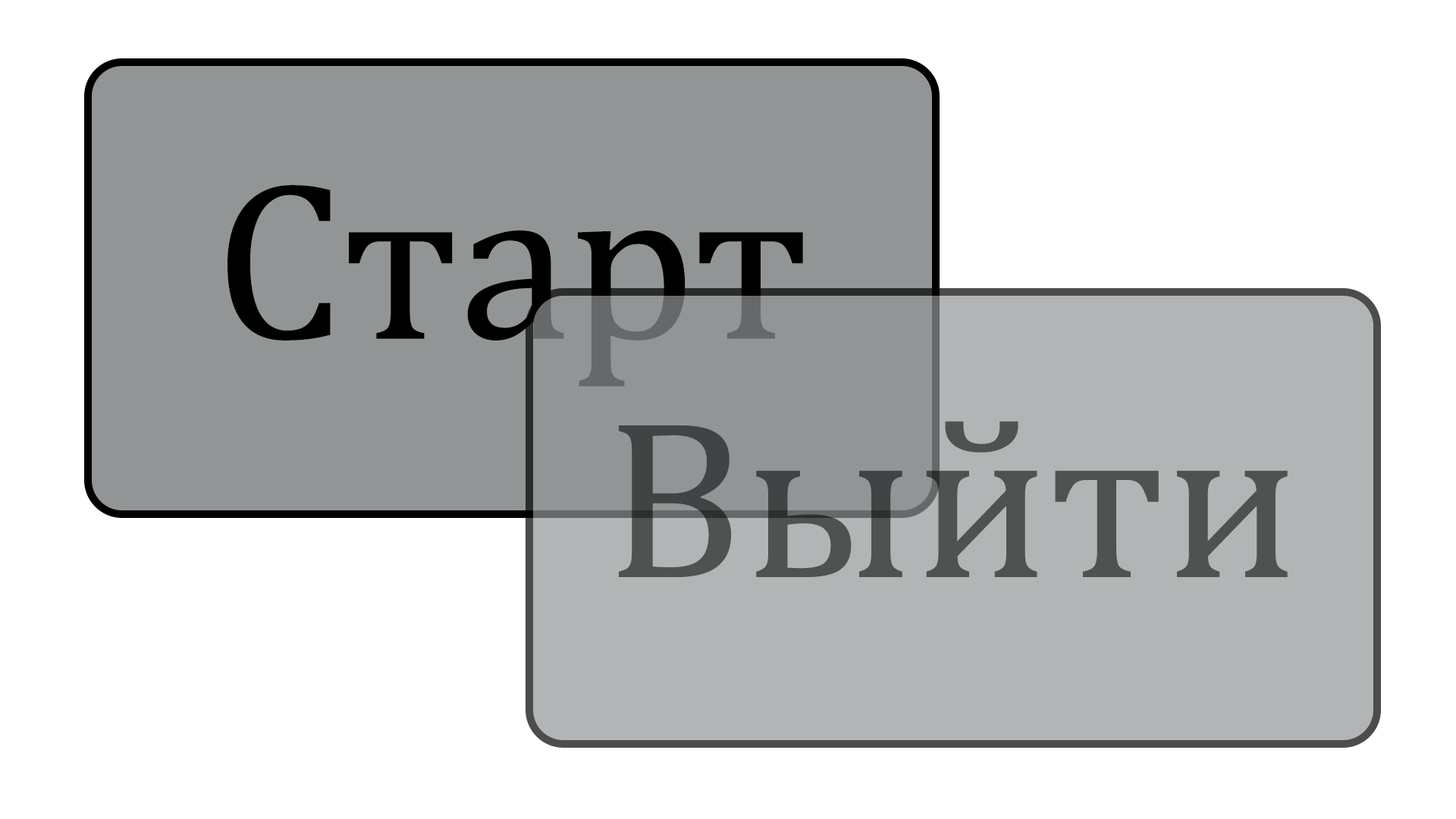
<style>
.page{position:relative;width:1456px;height:819px;background:#ffffff}
.page>*{position:absolute;margin:0}
.t1{font:227.5px "CambriaMath";color:#000000}
.t2{font:54.6px "BerlinSansFBDemi-Bold";color:#ffffff}
.t3{font:227.5px "CambriaMath";color:#505151}
</style>
<div class="page">
<p class="t1" style="left:227px;top:185px;width:576px;height:202px"><span class="t2"><br><br></span>Старт</p>
<p class="t3" style="left:619px;top:421px;width:669px;height:156px">Выйти</p>
</div>
